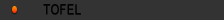
<style>
.page{position:relative;width:224px;height:20px;background:#333333}
.page>*{position:absolute;margin:0}
.t1{font:14.9px "ArialRoundedMTBold";color:#030303;scale:0.78 1}
</style>
<div class="page">
<p class="t1" style="left:43px;top:4px;width:38px;height:11px">TOFEL</p>
</div>
